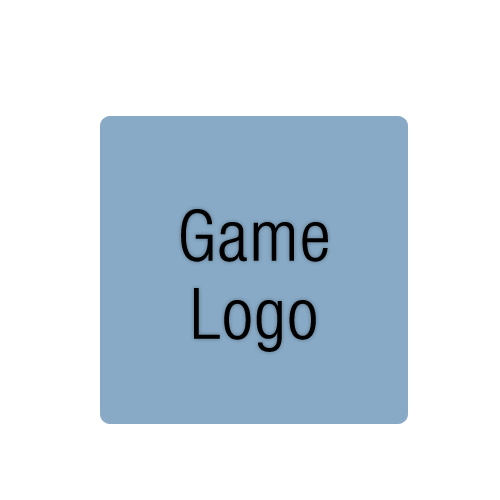
<style>
.page{position:relative;width:500px;height:500px;background:#ffffff}
.page>*{position:absolute;margin:0}
.t1{font:71px/78px "HelveticaNeueLTStd-LtCn";letter-spacing:0.025em;color:#000000}
</style>
<div class="page">
<p class="t1" style="left:181px;top:209px;width:147px;height:143px;text-align:center">Game<br>Logo</p>
</div>
